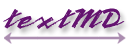
<style>
.page{position:relative;width:130px;height:46px;background:#ffffff}
.page>*{position:absolute;margin:0}
.t1{font:30px "BronxLetPlain";color:#641370}
</style>
<div class="page">
<p class="t1" style="left:3px;top:8px;width:122px;height:21px">textMD</p>
</div>
